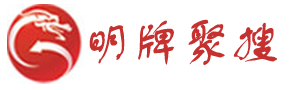
<style>
.page{position:relative;width:290px;height:90px;background:#ffffff}
.page>*{position:absolute;margin:0}
.t1{font:50px "FZSTK--GBK1-0";color:#c5312f}
</style>
<div class="page">
<p class="t1" style="left:89px;top:19px;width:188px;height:46px">明牌聚搜</p>
</div>
